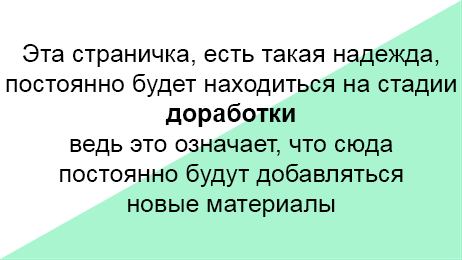
<style>
.page{position:relative;width:462px;height:260px;background:#a9f5d0}
.page>*{position:absolute;margin:0}
.t1{font:25px "ArialMT";color:#000000}
.t2{font:25px "Arial-BoldMT";color:#000000}
</style>
<div class="page">
<p class="t1" style="left:6px;top:44px;width:450px;height:173px;text-align:center">Эта страничка, есть такая надежда,<br>постоянно будет находиться на стадии<br><span class="t2">доработки<br></span>ведь это означает, что сюда<br>постоянно будут добавляться<br>новые материалы</p>
</div>
